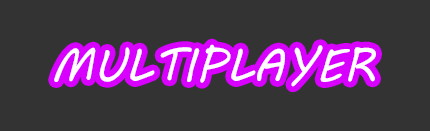
<style>
.page{position:relative;width:430px;height:131px;background:#333333}
.page>*{position:absolute;margin:0}
.t1{font:45.7px "MVBoli";color:#ffffff}
</style>
<div class="page">
<p class="t1" style="left:54px;top:44px;width:322px;height:43px">MULTIPLAYER</p>
</div>
